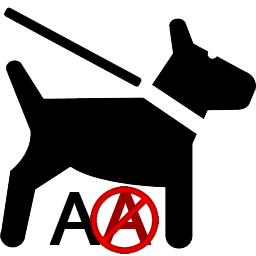
<style>
.page{position:relative;width:256px;height:256px;background:#ffffff}
.page>*{position:absolute;margin:0}
.t1{font:72px "ArialMT";letter-spacing:0.025em;color:#000000;font-weight:bold}
.t2{font:72px "ArialMT";letter-spacing:0.025em;color:#980001;font-weight:bold}
</style>
<div class="page">
<p class="t1" style="left:49px;top:192px;width:103px;height:53px">A<span class="t2">A</span></p>
</div>
